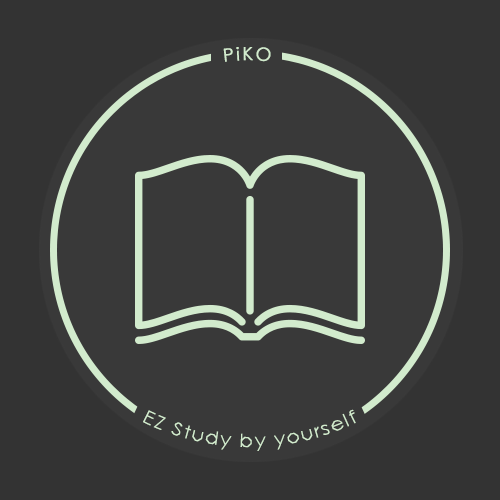
<style>
.page{position:relative;width:500px;height:500px;background:#393939}
.page>*{position:absolute;margin:0}
.t1{font:18px "CenturyGothic";letter-spacing:0.1em;color:#d2ebcd;font-weight:bold}
.t2{font:18px "CenturyGothic";letter-spacing:0.1em;color:#d2ebcd}
</style>
<div class="page">
<p class="t1" style="left:223px;top:47px;width:48px;height:15px">PiKO</p>
<p class="t2" style="left:143px;top:409px;width:213px;height:42px;text-align:center">EZ Study by yourself</p>
</div>
